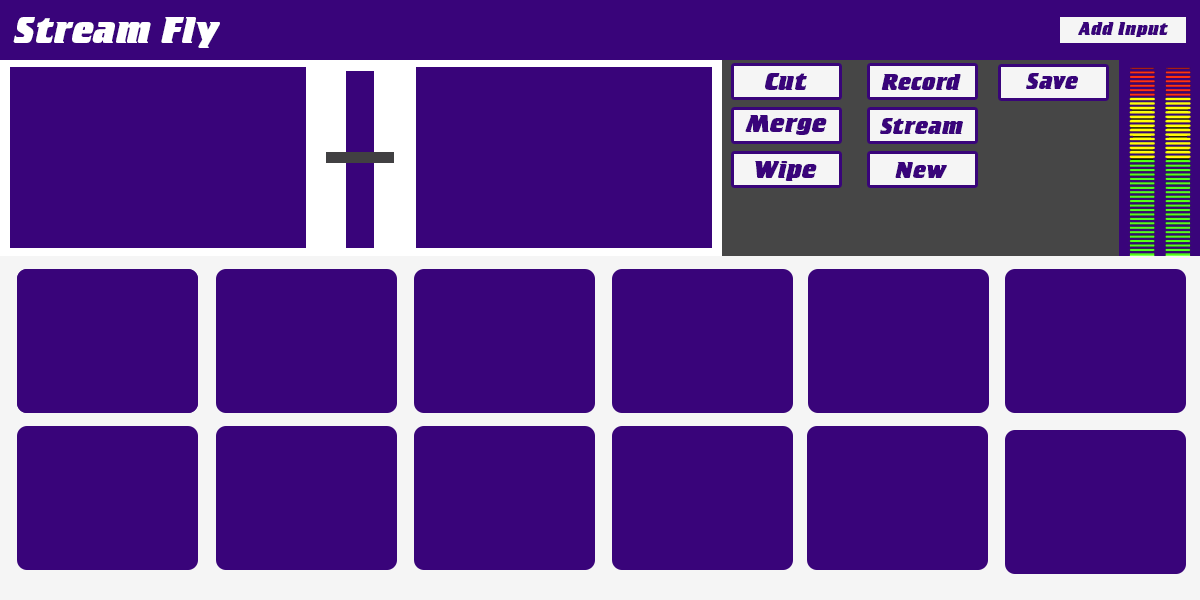
<style>
.page{position:relative;width:1200px;height:600px;background:#39047a}
.page>*{position:absolute;margin:0}
.t1{font:38.5px "CrilleeExtraBoldItalicStd";color:#ffffff}
.t2{font:18.5px "CrilleeExtraBoldItalicStd";color:#39047a}
.t3{font:25.7px "CrilleeExtraBoldItalicStd";color:#39047a}
.t4{font:23.4px "CrilleeExtraBoldItalicStd";color:#39047a}
</style>
<div class="page">
<p class="t1" style="left:13px;top:17px;width:207px;height:31px">Stream Fly</p>
<p class="t2" style="left:1078px;top:22px;width:90px;height:15px">Add Input</p>
<p class="t3" style="left:765px;top:73px;width:42px;height:17px">Cut</p>
<p class="t4" style="left:881px;top:74px;width:80px;height:16px">Record</p>
<p class="t4" style="left:1026px;top:73px;width:52px;height:16px">Save</p>
<p class="t3" style="left:745px;top:115px;width:82px;height:20px">Merge</p>
<p class="t4" style="left:880px;top:118px;width:83px;height:16px">Stream</p>
<p class="t3" style="left:755px;top:161px;width:62px;height:20px">Wipe</p>
<p class="t4" style="left:895px;top:162px;width:52px;height:16px">New</p>
</div>
